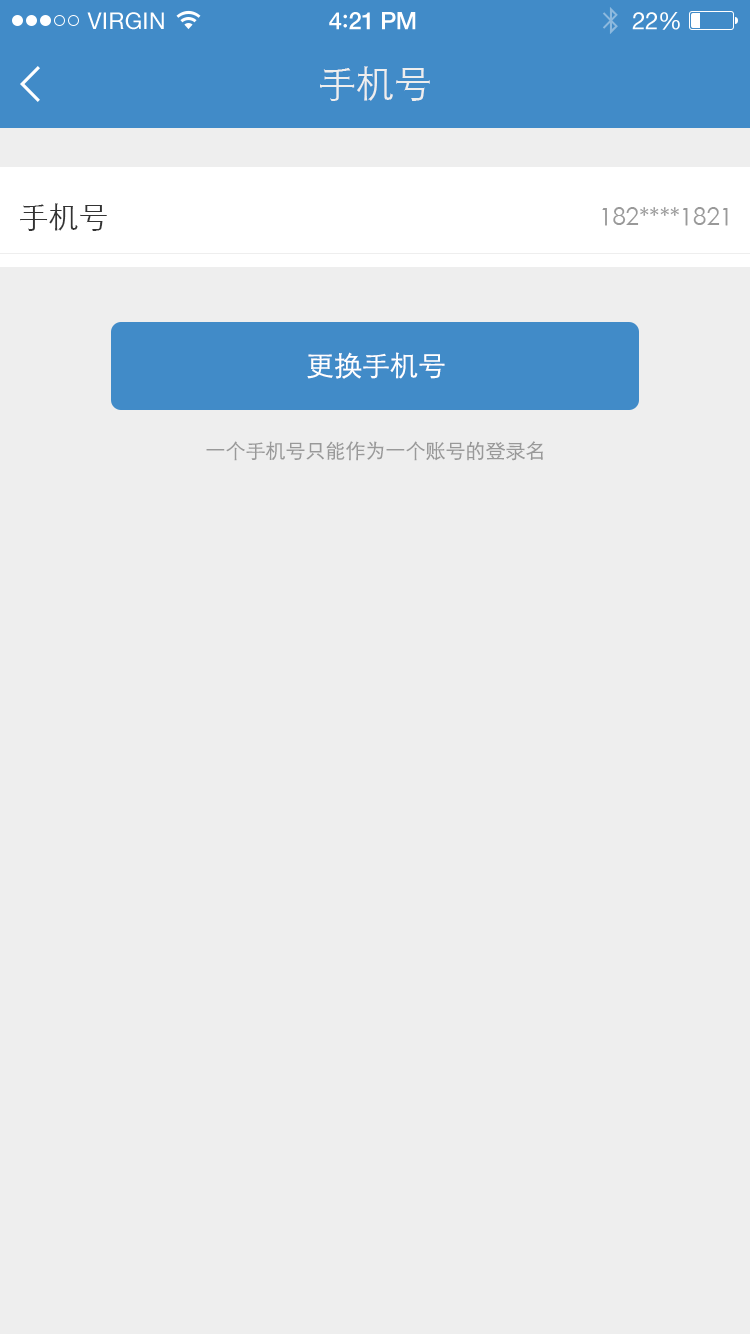
<style>
.page{position:relative;width:750px;height:1334px;background:#eeeeee}
.page>*{position:absolute;margin:0}
.t1{font:23px "HelveticaNeue";letter-spacing:0.02em;color:#ffffff}
.t2{font:24px "HelveticaNeue-Medium";letter-spacing:-0.02em;color:#ffffff}
.t3{font:26px "Avenir-Medium";letter-spacing:-0.02em;color:#ffffff}
.t4{font:24px "HelveticaNeue";letter-spacing:-0.02em;color:#ffffff}
.t5{font:38px "STXihei";color:#eeeeee}
.t6{font:30px "STXihei";color:#333333}
.t7{font:24px "STXihei";color:#999999}
.t8{font:28px "STXihei";color:#ffffff}
.t9{font:20px "STXihei";color:#999999}
</style>
<div class="page">
<p class="t1" style="left:87px;top:12px;width:77px;height:18px">VIRGIN</p>
<p class="t2" style="left:329px;top:12px;width:87px;height:18px">4<span class="t3">:</span>21 PM</p>
<p class="t4" style="left:632px;top:12px;width:48px;height:18px">22%</p>
<p class="t5" style="left:320px;top:66px;width:110px;height:35px">手机号</p>
<p class="t6" style="left:20px;top:203px;width:87px;height:28px">手机号</p>
<p class="t7" style="left:602px;top:207px;width:126px;height:19px">182****1821</p>
<p class="t8" style="left:307px;top:352px;width:138px;height:27px">更换手机号</p>
<p class="t9" style="left:206px;top:441px;width:337px;height:20px">一个手机号只能作为一个账号的登录名</p>
</div>
